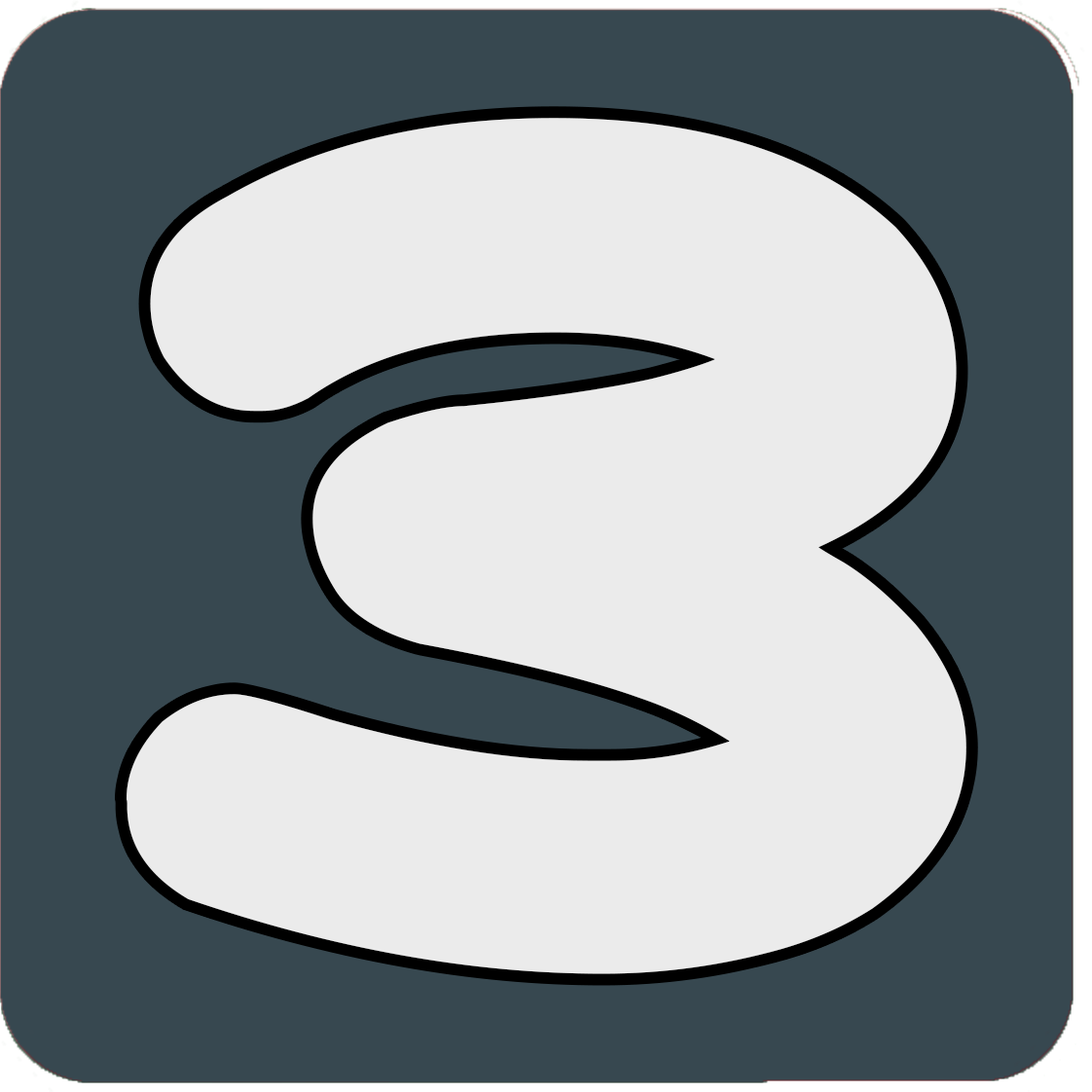
<style>
.page{position:relative;width:1092px;height:1092px;background:#374850}
.page>*{position:absolute;margin:0}
.t1{font:1362.5px "CARTOONIC";color:#ebebeb}
</style>
<div class="page">
<p class="t1" style="left:127px;top:118px;width:839px;height:856px">3</p>
</div>
